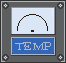
<style>
.page{position:relative;width:66px;height:63px;background:#5d5e5f}
.page>*{position:absolute;margin:0}
.t1{font:11.1px "Immortal";color:#acb7c9}
</style>
<div class="page">
<p class="t1" style="left:15px;top:42px;width:36px;height:8px">TEMP</p>
</div>
